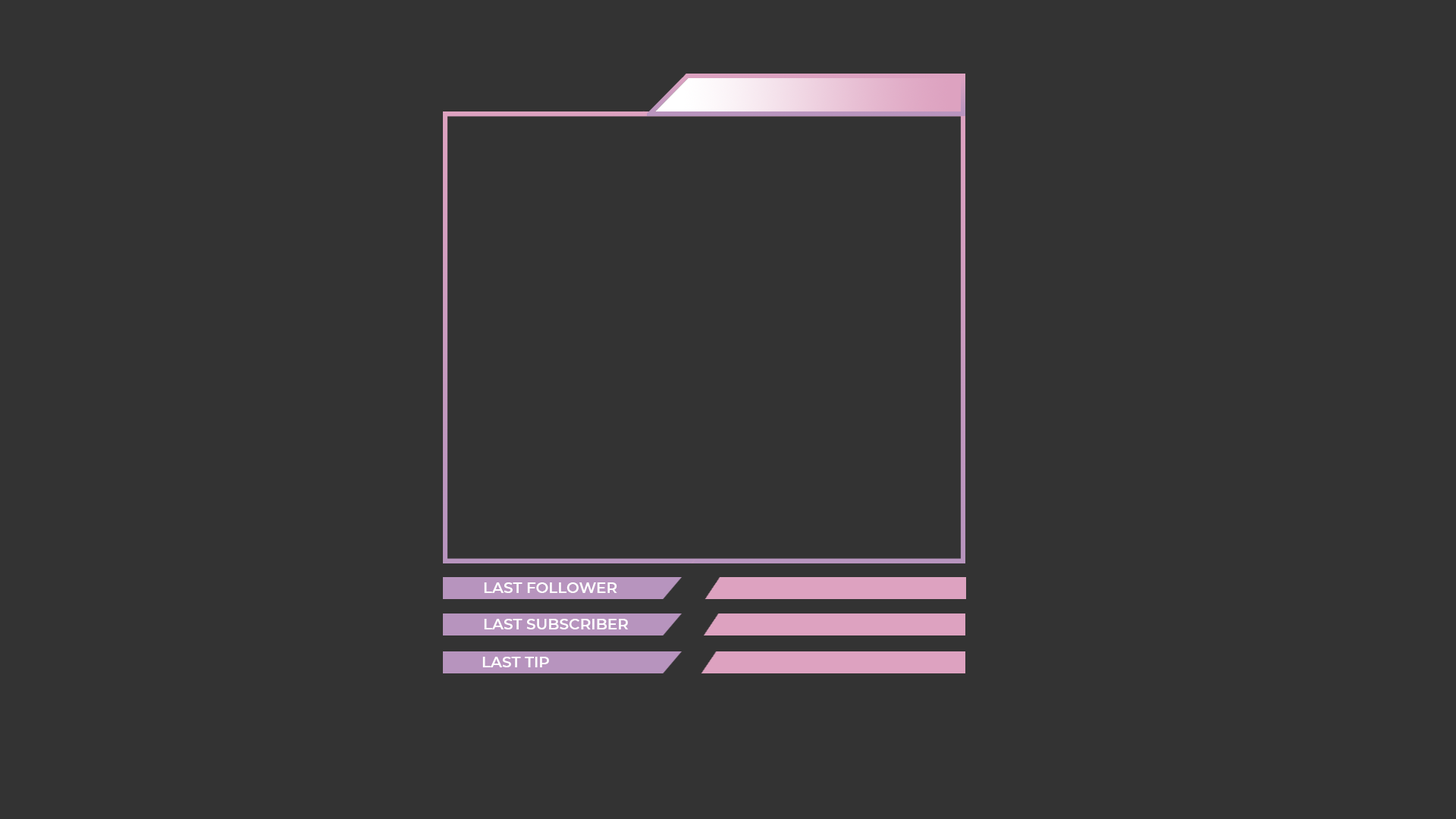
<style>
.page{position:relative;width:1456px;height:819px;background:#333333}
.page>*{position:absolute;margin:0}
.t1{font:15.2px "Montserrat-SemiBold";color:#ffffff}
</style>
<div class="page">
<p class="t1" style="left:484px;top:582px;width:133px;height:11px">LAST FOLLOWER</p>
<p class="t1" style="left:484px;top:619px;width:145px;height:10px">LAST SUBSCRIBER</p>
<p class="t1" style="left:482px;top:657px;width:67px;height:10px">LAST TIP</p>
</div>
